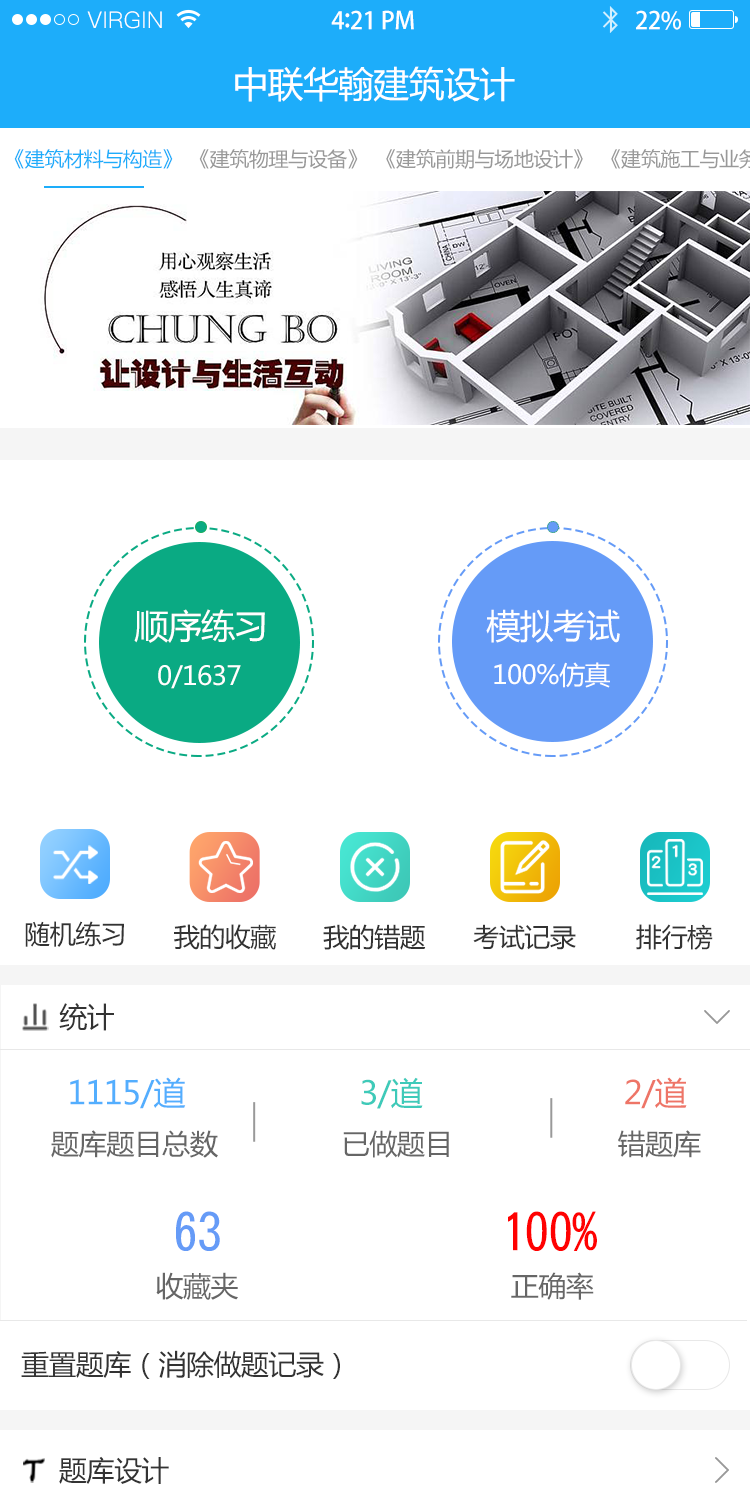
<style>
.page{position:relative;width:750px;height:1510px;background:#ffffff}
.page>*{position:absolute;margin:0}
.t1{font:23px "PingFang-SC-Regular";letter-spacing:0.02em;color:#ffffff}
.t2{font:24px "AdobeHeitiStd-Regular";letter-spacing:-0.02em;color:#ffffff}
.t3{font:26px "AdobeHeitiStd-Regular";letter-spacing:-0.02em;color:#ffffff}
.t4{font:36px "MicrosoftYaHei";letter-spacing:-0.02em;color:#ffffff}
.t5{font:20px "MicrosoftYaHei";letter-spacing:-0.02em;color:#1dadfa}
.t6{font:20px "MicrosoftYaHei";letter-spacing:-0.02em;color:#999999}
.t7{font:34px "MicrosoftYaHei";letter-spacing:-0.02em;color:#ffffff}
.t8{font:26px "MicrosoftYaHei";letter-spacing:-0.02em;color:#ffffff}
.t9{font:26px "MicrosoftYaHei";letter-spacing:-0.02em;color:#333333}
.t10{font:28px "MicrosoftYaHei";letter-spacing:-0.02em;color:#333333}
.t11{font:32px "MicrosoftYaHei";letter-spacing:-0.02em;color:#53aefe}
.t12{font:32px "MicrosoftYaHei";letter-spacing:-0.02em;color:#3ecab9}
.t13{font:32px "MicrosoftYaHei";letter-spacing:-0.02em;color:#ee7567}
.t14{font:28px "MicrosoftYaHei";letter-spacing:-0.02em;color:#666666}
.t15{font:49.9px "DFHeiW5-A";letter-spacing:-0.02em;color:#659bf7}
.t16{font:49.9px "DFHeiW5-A";letter-spacing:-0.02em;color:#ff0101}
.t17{font:28.1px "MicrosoftYaHei";letter-spacing:-0.02em;color:#333333}
</style>
<div class="page">
<p class="t1" style="left:87px;top:11px;width:75px;height:18px">VIRGIN</p>
<p class="t2" style="left:331px;top:10px;width:83px;height:20px">4<span class="t3">:</span>21 PM</p>
<p class="t2" style="left:636px;top:10px;width:45px;height:20px">22%</p>
<p class="t4" style="left:235px;top:66px;width:280px;height:36px">中联华翰建筑设计</p>
<p class="t5" style="left:14px;top:149px;width:159px;height:20px">《建筑材料与构造》</p>
<p class="t6" style="left:199px;top:149px;width:159px;height:20px">《建筑物理与设备》</p>
<p class="t6" style="left:386px;top:149px;width:197px;height:20px">《建筑前期与场地设计》</p>
<p class="t7" style="left:134px;top:609px;width:131px;height:34px">顺序练习</p>
<p class="t7" style="left:486px;top:609px;width:134px;height:34px">模拟考试</p>
<p class="t8" style="left:158px;top:665px;width:83px;height:24px">0/1637</p>
<p class="t8" style="left:494px;top:662px;width:116px;height:26px">100%仿真</p>
<p class="t9" style="left:25px;top:921px;width:99px;height:26px">随机练习</p>
<p class="t9" style="left:174px;top:924px;width:102px;height:26px">我的收藏</p>
<p class="t9" style="left:323px;top:924px;width:103px;height:26px">我的错题</p>
<p class="t9" style="left:473px;top:924px;width:103px;height:26px">考试记录</p>
<p class="t9" style="left:636px;top:924px;width:77px;height:26px">排行榜</p>
<p class="t10" style="left:59px;top:1003px;width:55px;height:28px">统计</p>
<p class="t11" style="left:70px;top:1077px;width:116px;height:32px">1115/道</p>
<p class="t12" style="left:361px;top:1077px;width:62px;height:32px">3/道</p>
<p class="t13" style="left:625px;top:1077px;width:62px;height:32px">2/道</p>
<p class="t14" style="left:51px;top:1130px;width:167px;height:28px">题库题目总数</p>
<p class="t14" style="left:343px;top:1130px;width:106px;height:28px">已做题目</p>
<p class="t14" style="left:618px;top:1130px;width:83px;height:28px">错题库</p>
<p class="t15" style="left:176px;top:1211px;width:44px;height:40px">63</p>
<p class="t16" style="left:508px;top:1211px;width:89px;height:40px">100%</p>
<p class="t14" style="left:156px;top:1272px;width:82px;height:28px">收藏夹</p>
<p class="t14" style="left:511px;top:1272px;width:83px;height:28px">正确率</p>
<p class="t17" style="left:21px;top:1350px;width:319px;height:29px">重置题库（消除做题记录）</p>
<p class="t17" style="left:59px;top:1456px;width:110px;height:28px">题库设计</p>
</div>
